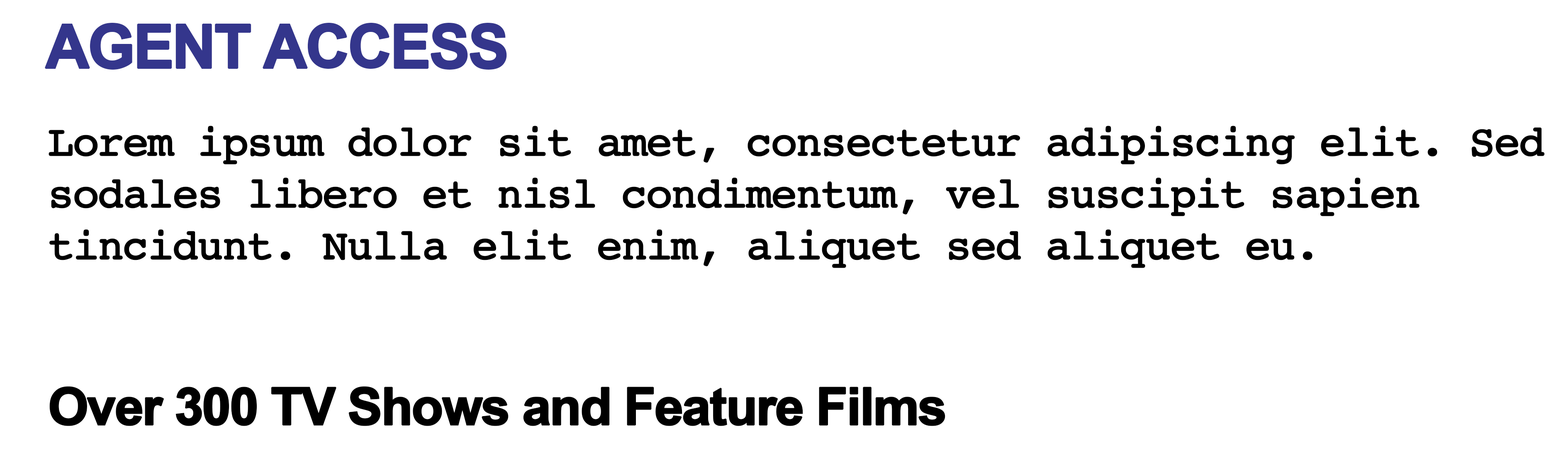
<style>
.page{position:relative;width:1568px;height:453px;background:#ffffff}
.page>*{position:absolute;margin:0}
.t1{font:60.5px "Arial-BoldMT";letter-spacing:-0.05em;color:#34368c;font-weight:bold}
.t2{font:43.2px "Courier";letter-spacing:-0.05em;color:#000000;font-weight:bold}
.t3{font:51.9px "Arial-BoldMT";letter-spacing:-0.05em;color:#000000;font-weight:bold}
</style>
<div class="page">
<p class="t1" style="left:45px;top:23px;width:462px;height:47px">AGENT ACCESS</p>
<p class="t2" style="left:49px;top:126px;width:1496px;height:300px">Lorem ipsum dolor sit amet, consectetur adipiscing elit. Sed sodales libero et nisl condimentum, vel suscipit sapien tincidunt. Nulla elit enim, aliquet sed aliquet eu.<br><br><br><span class="t3">Over 300 TV Shows and Feature Films</span></p>
</div>
